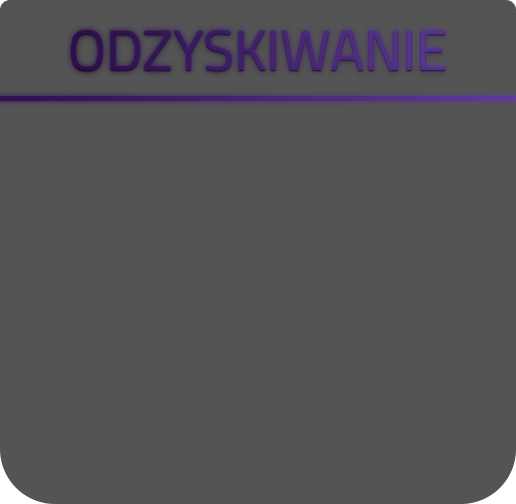
<style>
.page{position:relative;width:516px;height:504px;background:#545454}
.page>*{position:absolute;margin:0}
.t1{font:57.3px "TitilliumWeb-Regular"}
</style>
<div class="page">
<p class="t1" style="left:71px;top:29px;width:374px;height:42px">ODZYSKIWANIE</p>
</div>
